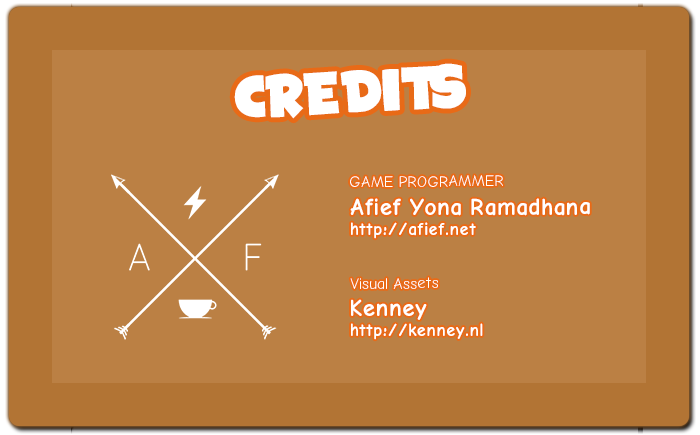
<style>
.page{position:relative;width:700px;height:435px;background:#bb8044}
.page>*{position:absolute;margin:0}
.t1{font:32.4px "SpaceComics";color:#ffffff}
.t2{font:15.7px "ComicNeue-Regular";color:#ffffff}
.t3{font:24px/20px "ComicNeue-Bold";color:#ffffff}
.t4{font:18px/20px "ComicNeue-Bold";color:#ffffff}
</style>
<div class="page">
<p class="t1" style="left:234px;top:63px;width:232px;height:56px;rotate:-3deg">CREDITS</p>
<p class="t2" style="left:350px;top:175px;width:153px;height:12px">GAME PROGRAMMER</p>
<p class="t3" style="left:350px;top:198px;width:240px;height:41px">Afief Yona Ramadhana<br><span class="t4">http://afief.net</span></p>
<p class="t2" style="left:350px;top:277px;width:88px;height:12px">Visual Assets</p>
<p class="t4" style="left:351px;top:299px;width:132px;height:41px"><span class="t3">Kenney<br></span>http://kenney.nl</p>
</div>
